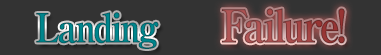
<style>
.page{position:relative;width:381px;height:55px;background:#333333}
.page>*{position:absolute;margin:0}
.t1{font:40px "RyuminPro-ExBold";letter-spacing:-0.08em;color:#007980;scale:0.9 1}
.t2{font:45px "RyuminPro-ExBold";letter-spacing:-0.08em;scale:0.9 1}
</style>
<div class="page">
<p class="t1" style="left:36px;top:12px;width:123px;height:37px">Landing</p>
<p class="t2" style="left:222px;top:8px;width:123px;height:36px">Failure!</p>
</div>
